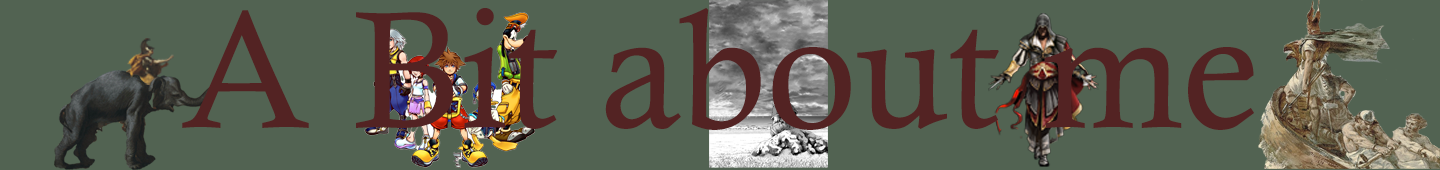
<style>
.page{position:relative;width:1440px;height:170px;background:#526352}
.page>*{position:absolute;margin:0}
.t1{font:166.7px "CalistoMT";color:#532323}
</style>
<div class="page">
<p class="t1" style="left:182px;top:8px;width:1072px;height:122px">A Bit about me</p>
</div>
